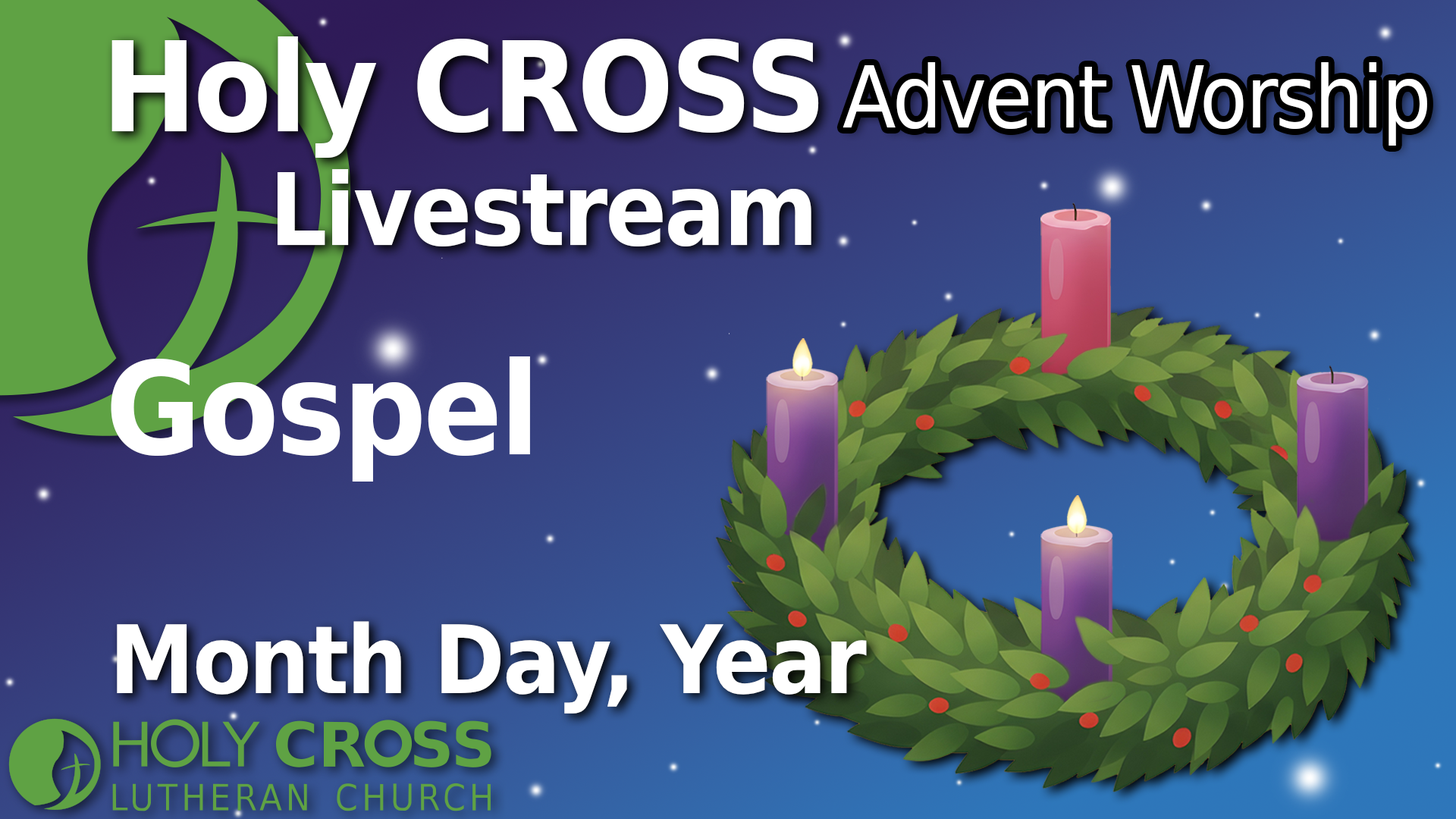
<style>
.page{position:relative;width:1456px;height:819px}
.page>*{position:absolute;margin:0}
.t1{font:124.7px "DejaVuSans-Bold";letter-spacing:-0.025em;color:#ffffff;scale:0.91 1}
.t2{font:85.7px "DejaVuSans";letter-spacing:-0.025em;color:#ffffff;scale:0.91 1}
.t3{font:99.8px "DejaVuSans-Bold";letter-spacing:-0.025em;color:#ffffff;scale:0.91 1}
.t4{font:128.6px "DejaVuSans-Bold";letter-spacing:-0.025em;color:#ffffff;scale:0.91 1}
.t5{font:94.3px "DejaVuSans-Bold";letter-spacing:-0.025em;color:#ffffff;scale:0.91 1}
</style>
<div class="page">
<p class="t1" style="left:111px;top:36px;width:708px;height:122px">Holy CROSS</p>
<p class="t2" style="left:842px;top:62px;width:585px;height:84px">Advent Worship</p>
<p class="t3" style="left:278px;top:169px;width:533px;height:77px">Livestream</p>
<p class="t4" style="left:111px;top:356px;width:419px;height:126px">Gospel</p>
<p class="t5" style="left:117px;top:621px;width:750px;height:93px">Month Day, Year</p>
</div>
